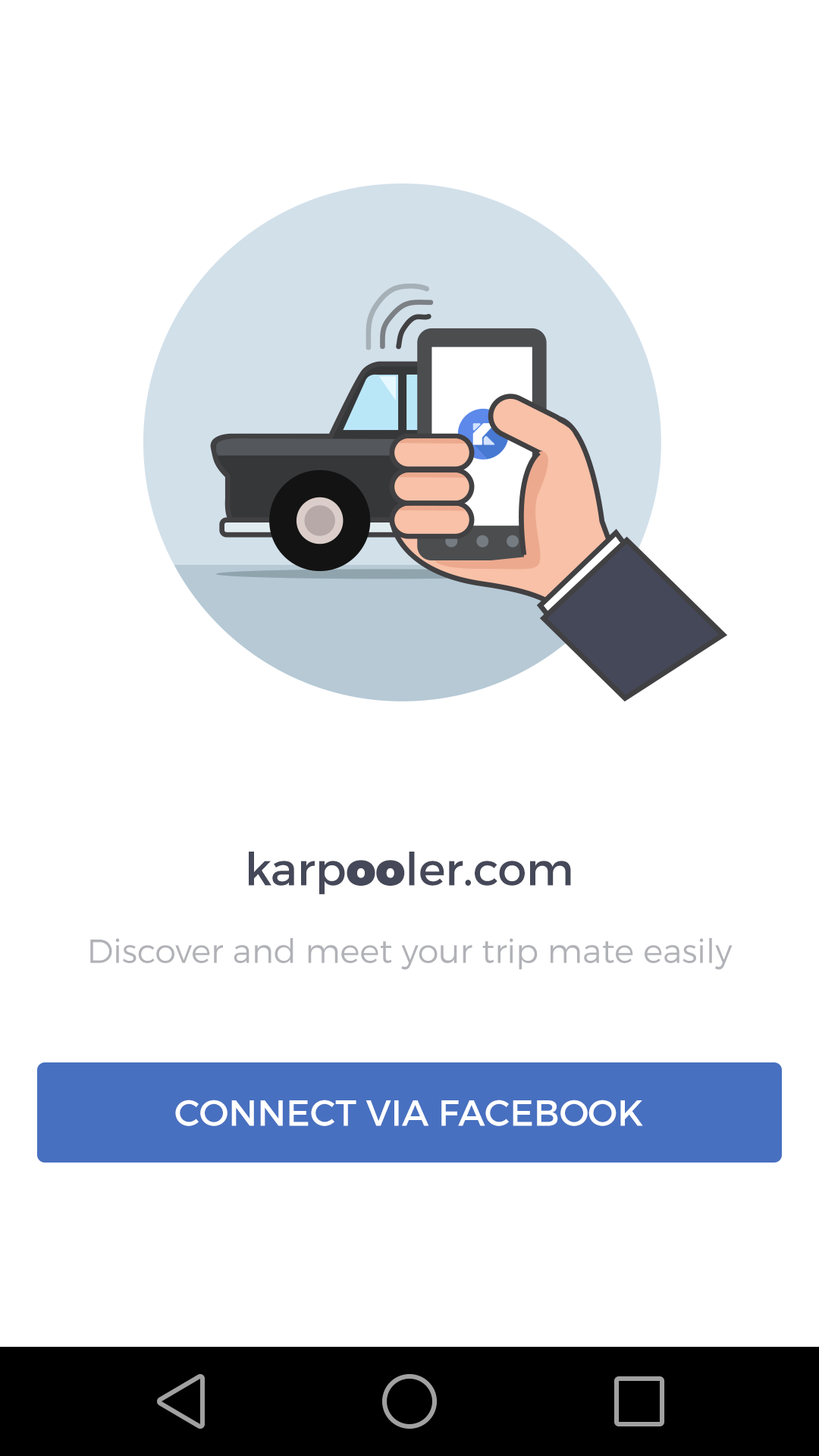
<style>
.page{position:relative;width:819px;height:1456px;background:#ffffff}
.page>*{position:absolute;margin:0}
.t1{font:45.5px "Montserrat-Regular";color:#454858}
.t2{font:45.5px "Montserrat-Black";color:#454858}
.t3{font:33.4px "Montserrat-Light";color:#b1b2b7}
.t4{font:36.4px "Montserrat-Regular";color:#ffffff;text-transform:uppercase}
</style>
<div class="page">
<p class="t1" style="left:249px;top:852px;width:322px;height:43px">karp<span class="t2">oo</span>ler.com</p>
<p class="t3" style="left:90px;top:938px;width:643px;height:32px">Discover and meet your trip mate easily</p>
<p class="t4" style="left:175px;top:1100px;width:468px;height:26px">CONNECT VIA FACEBOOK</p>
</div>
